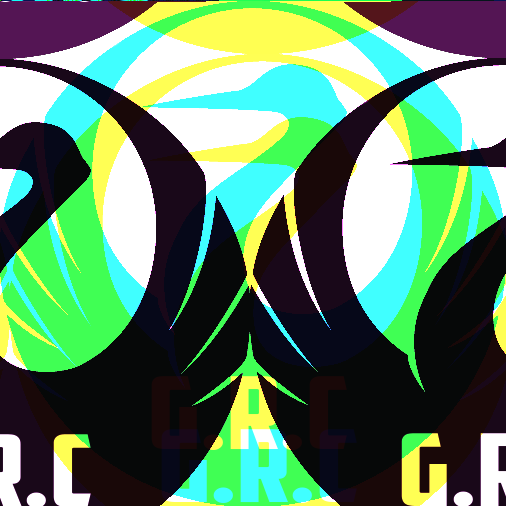
<style>
.page{position:relative;width:506px;height:506px}
.page>*{position:absolute;margin:0}
.t1{font:100.3px "AmericanCaptain";scale:1.23 1}
</style>
<div class="page">
<p class="t1" style="left:151px;top:375px;width:196px;height:74px">G.R.C</p>
</div>
